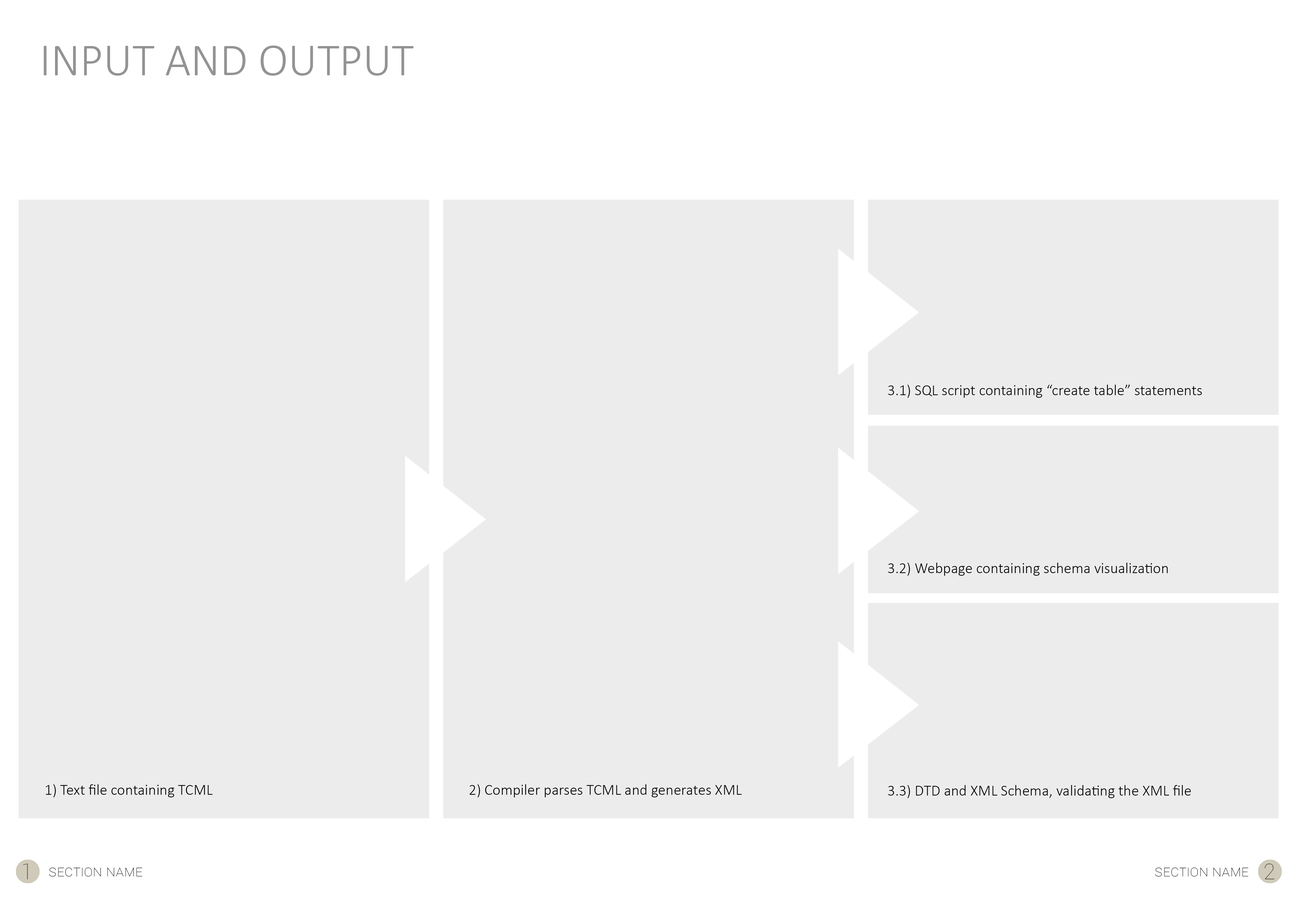
<style>
.page{position:relative;width:1299px;height:918px;background:#ececec}
.page>*{position:absolute;margin:0}
.t1{font:45.8px "Calibri-Light";color:#939393;text-transform:uppercase}
.t2{font:15.3px "Calibri-Light";color:#000000}
.t3{font:21.8px "Roboto-Thin";color:#484848}
.t4{font:15.3px "Roboto-Thin";color:#000000;font-variant:small-caps}
</style>
<div class="page">
<p class="t1" style="left:44px;top:46px;width:370px;height:30px">input and output</p>
<p class="t2" style="left:888px;top:385px;width:313px;height:13px">3.1) SQL script containing “create table” statements</p>
<p class="t2" style="left:888px;top:563px;width:279px;height:13px">3.2) Webpage containing schema visualization</p>
<p class="t2" style="left:46px;top:784px;width:167px;height:14px">1) Text file containing TCML</p>
<p class="t2" style="left:469px;top:784px;width:273px;height:14px">2) Compiler parses TCML and generates XML</p>
<p class="t2" style="left:888px;top:785px;width:302px;height:13px">3.3) DTD and XML Schema, validating the XML file</p>
<p class="t3" style="left:23px;top:864px;width:5px;height:16px">1</p>
<p class="t4" style="left:49px;top:868px;width:93px;height:9px">section name</p>
<p class="t4" style="left:1155px;top:868px;width:93px;height:9px">section name</p>
<p class="t3" style="left:1264px;top:864px;width:10px;height:16px">2</p>
</div>
